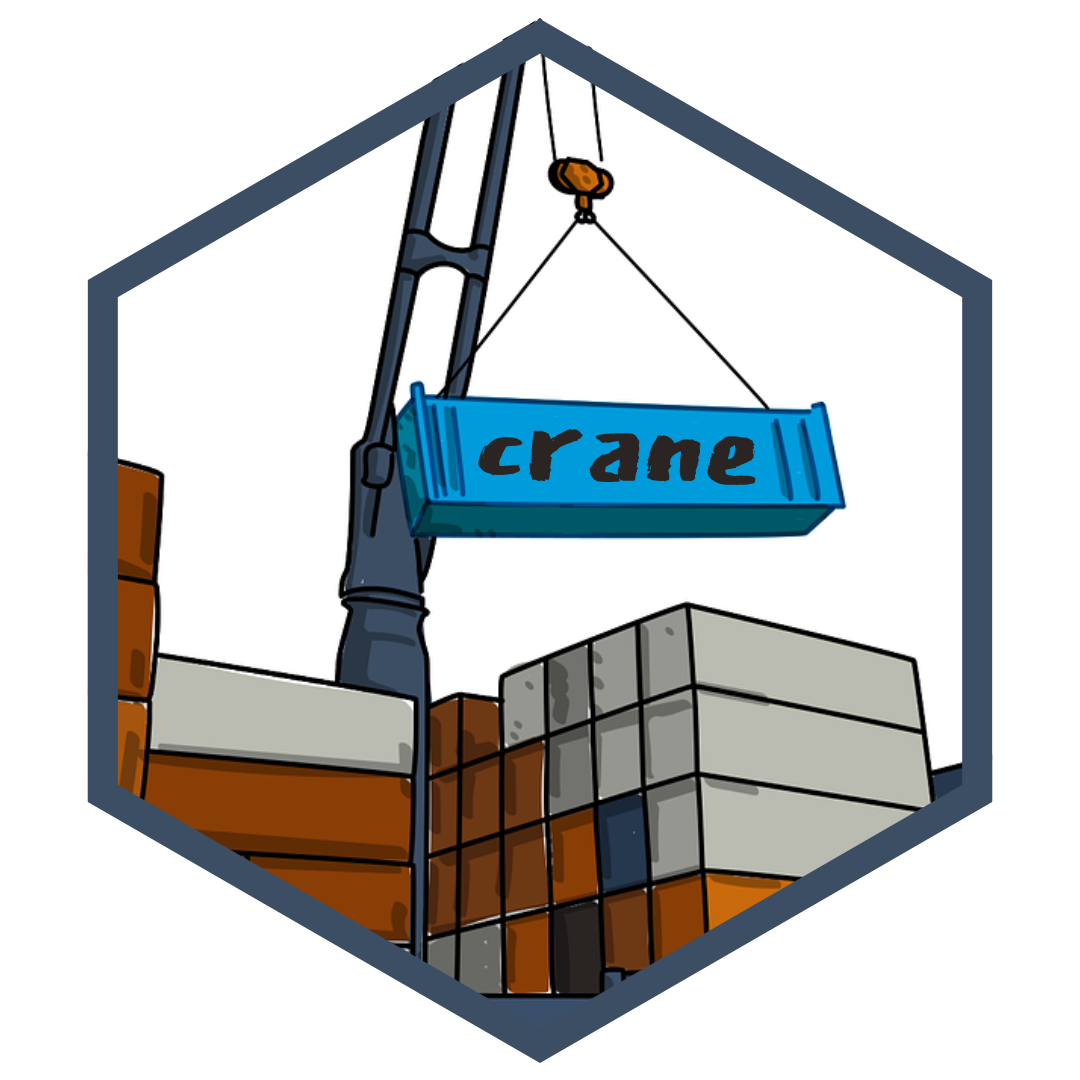
<style>
.page{position:relative;width:1080px;height:1080px;background:#ffffff}
.page>*{position:absolute;margin:0}
.t1{font:174px "EastSeaDokdo-Regular";color:#2a2523;font-weight:bold}
</style>
<div class="page">
<p class="t1" style="left:478px;top:428px;width:278px;height:57px;rotate:1deg">crane</p>
</div>
